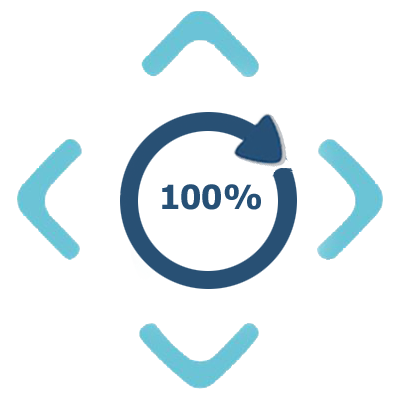
<style>
.page{position:relative;width:400px;height:400px;background:#ffffff}
.page>*{position:absolute;margin:0}
.t1{font:33.3px "Tahoma-Bold";color:#265076}
</style>
<div class="page">
<p class="t1" style="left:162px;top:184px;width:99px;height:26px">100%</p>
</div>
